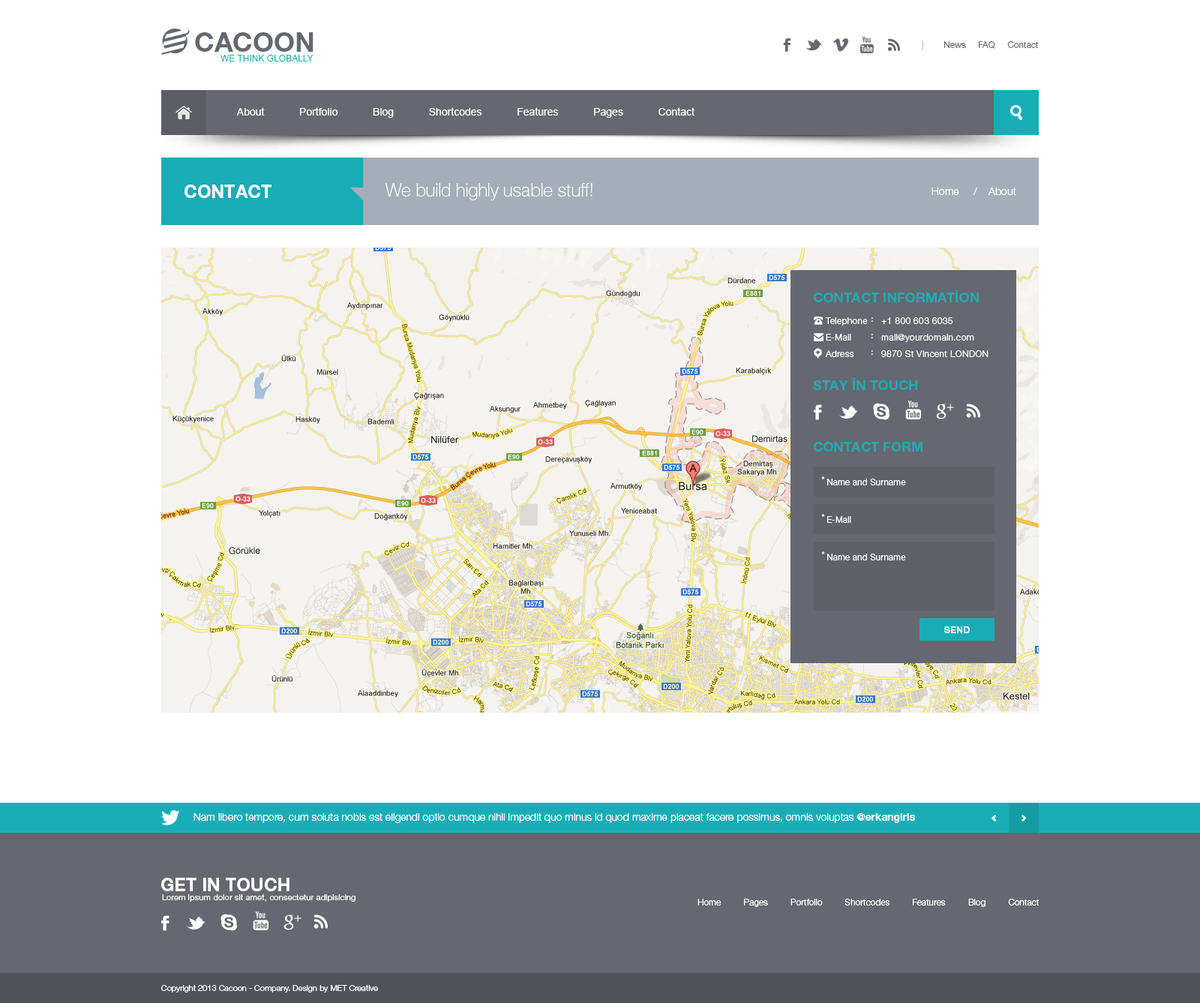
<style>
.page{position:relative;width:1200px;height:1003px;background:#ffffff}
.page>*{position:absolute;margin:0}
.t1{font:27px "HelveticaNeueLTPro-Bd";color:#656870}
.t2{font:9px "HelveticaNeueLTPro-Lt";color:#656870}
.t3{font:9px "HelveticaNeueLTPro-Lt";color:#bec1c8}
.t4{font:9px "ArialMT";color:#18adb6}
.t5{font:10.5px "ArialMT";color:#ffffff}
.t6{font:18px "HelveticaNeueLTPro-Bd";color:#ffffff}
.t7{font:18px "HelveticaNeueLTPro-Th";color:#ffffff}
.t8{font:10.5px "HelveticaNeueLTPro-Lt";color:#ffffff}
.t9{font:13.5px "HelveticaNeueLTPro-Bd";color:#18adb6;text-transform:uppercase}
.t10{font:9px/16.5px "HelveticaNeueLTPro-Lt";letter-spacing:0.03em;color:#ffffff}
.t11{font:9px "HelveticaNeueLTPro-Lt";letter-spacing:0.025em;color:#ffffff}
.t12{font:9px "HelveticaNeueLTPro-Lt";letter-spacing:0.025em;color:#ffffff;scale:0.97 1}
.t13{font:9px "HelveticaNeueLTPro-Bd";letter-spacing:0.025em;color:#ffffff}
.t14{font:10.5px "HelveticaNeueLTPro-Bd";color:#ffffff}
.t15{font:8.2px "HelveticaNeueLTPro-Lt";letter-spacing:0.025em;color:#ffffff}
.t16{font:9px "HelveticaNeueLTPro-Lt";color:#ffffff}
.t17{font:8.2px "HelveticaNeueLTPro-Lt";color:#ffffff}
</style>
<div class="page">
<p class="t1" style="left:195px;top:32px;width:119px;height:20px">CACOON</p>
<p class="t2" style="left:922px;top:40px;width:116px;height:10px"><span class="t3">|</span>        News     FAQ     Contact</p>
<p class="t4" style="left:220px;top:55px;width:94px;height:7px">WE THINK GLOBALLY</p>
<p class="t5" style="left:236px;top:107px;width:458px;height:11px">About            Portfolio            Blog            Shortcodes            Features            Pages            Contact</p>
<p class="t6" style="left:184px;top:184px;width:88px;height:14px">CONTACT</p>
<p class="t7" style="left:385px;top:183px;width:207px;height:17px">We build highly usable stuff!</p>
<p class="t8" style="left:932px;top:188px;width:84px;height:7px">Home     /    About</p>
<p class="t9" style="left:814px;top:290px;width:165px;height:12px">Contact Information</p>
<p class="t10" style="left:825px;top:317px;width:43px;height:40px">Telephone<br>E-Mail<br>Adress</p>
<p class="t10" style="left:872px;top:317px;width:1px;height:38px">:<br>:<br>:</p>
<p class="t10" style="left:881px;top:317px;width:107px;height:40px">+1 800 603 6035<br>mail@yourdomain.com<br>9870 St Vincent LONDON</p>
<p class="t9" style="left:813px;top:378px;width:104px;height:12px">Stay in Touch</p>
<p class="t9" style="left:814px;top:442px;width:108px;height:10px">Contact Form</p>
<p class="t11" style="left:821px;top:476px;width:4px;height:3px">*</p>
<p class="t12" style="left:827px;top:478px;width:79px;height:7px">Name and Surname</p>
<p class="t11" style="left:821px;top:514px;width:4px;height:3px">*</p>
<p class="t12" style="left:827px;top:516px;width:24px;height:7px">E-Mail</p>
<p class="t11" style="left:821px;top:551px;width:4px;height:3px">*</p>
<p class="t12" style="left:827px;top:554px;width:79px;height:6px">Name and Surname</p>
<p class="t13" style="left:944px;top:626px;width:26px;height:7px">SEND</p>
<p class="t8" style="left:194px;top:813px;width:721px;height:10px">Nam libero tempore, cum soluta nobis est eligendi optio cumque nihil impedit quo minus id quod maxime placeat facere possimus, omnis voluptas <span class="t14">@erkangiris</span></p>
<p class="t6" style="left:161px;top:878px;width:129px;height:13px">GET IN TOUCH</p>
<p class="t15" style="left:162px;top:894px;width:194px;height:8px">Lorem ipsum dolor sit amet, consectetur adipisicing</p>
<p class="t16" style="left:698px;top:898px;width:341px;height:9px">Home         Pages         Portfolio         Shortcodes         Features         Blog         Contact</p>
<p class="t17" style="left:161px;top:985px;width:217px;height:7px">Copyright 2013 Cacoon - Company. Design by MET Creative</p>
</div>
